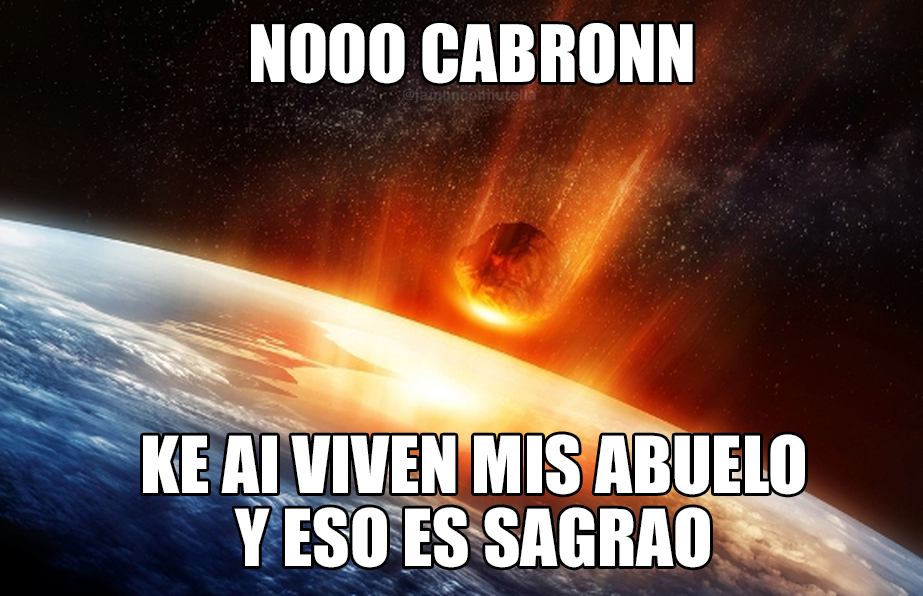
<style>
.page{position:relative;width:923px;height:596px}
.page>*{position:absolute;margin:0}
.t1{font:72.9px "Impact";color:#ffffff}
.t2{font:16.5px "FranklinGothic-Demi";color:#513c37}
.t3{font:72.6px "Impact";color:#ffffff}
</style>
<div class="page">
<p class="t1" style="left:251px;top:23px;width:442px;height:61px">NOOO CABRONN</p>
<p class="t2" style="left:402px;top:88px;width:134px;height:15px">@jamonconnutella</p>
<p class="t3" style="left:143px;top:434px;width:662px;height:134px;text-align:center">KE AI VIVEN MIS ABUELO<br>Y ESO ES SAGRAO</p>
</div>
